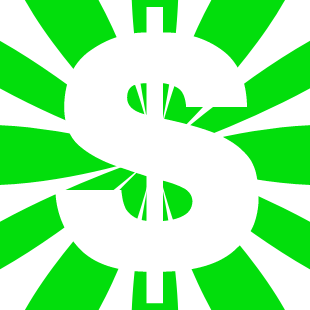
<style>
.page{position:relative;width:310px;height:310px;background:#ffffff}
.page>*{position:absolute;margin:0}
.t1{font:319.4px "HelveticaNeueLT-Black";letter-spacing:0.01em;color:#ffffff}
</style>
<div class="page">
<p class="t1" style="left:55px;top:7px;width:204px;height:297px">$</p>
</div>
